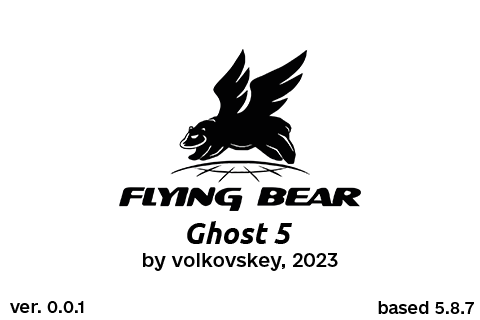
<style>
.page{position:relative;width:480px;height:320px;background:#ffffff}
.page>*{position:absolute;margin:0}
.t1{font:30px "Ubuntu-BoldItalic";color:#000000}
.t2{font:18px "e-Ukraine-Medium";color:#000000}
.t3{font:16px "e-Ukraine-Medium";color:#000000}
</style>
<div class="page">
<p class="t1" style="left:187px;top:221px;width:105px;height:23px">Ghost 5</p>
<p class="t2" style="left:143px;top:253px;width:195px;height:18px">by volkovskey, 2023</p>
<p class="t3" style="left:10px;top:301px;width:74px;height:12px">ver. 0.0.1</p>
<p class="t3" style="left:378px;top:301px;width:96px;height:13px">based 5.8.7</p>
</div>
